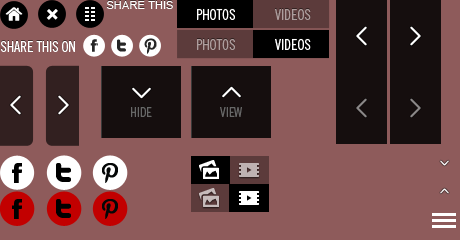
<style>
.page{position:relative;width:460px;height:240px;background:#8e5b5b}
.page>*{position:absolute;margin:0}
.t1{font:11px "ArialMT";letter-spacing:0.01em;color:#ffffff;text-transform:uppercase}
.t2{font:14px "TradeGothicLTStd-Cn18";color:#ffffff;text-transform:uppercase}
.t3{font:14px "TradeGothicLTStd-Cn18";color:#ae9d9d;text-transform:uppercase}
.t4{font:13px "TradeGothicLTStd-Cn18";color:#676767;text-transform:uppercase}
</style>
<div class="page">
<p class="t1" style="left:106px;top:1px;width:67px;height:8px">Share This on</p>
<p class="t2" style="left:197px;top:9px;width:38px;height:11px">Photos</p>
<p class="t3" style="left:275px;top:9px;width:36px;height:11px">Videos</p>
<p class="t2" style="left:1px;top:41px;width:74px;height:11px">Share This on</p>
<p class="t3" style="left:197px;top:39px;width:38px;height:11px">Photos</p>
<p class="t2" style="left:275px;top:39px;width:36px;height:11px">Videos</p>
<p class="t4" style="left:131px;top:107px;width:21px;height:10px">Hide</p>
<p class="t4" style="left:220px;top:107px;width:22px;height:10px">View</p>
</div>
